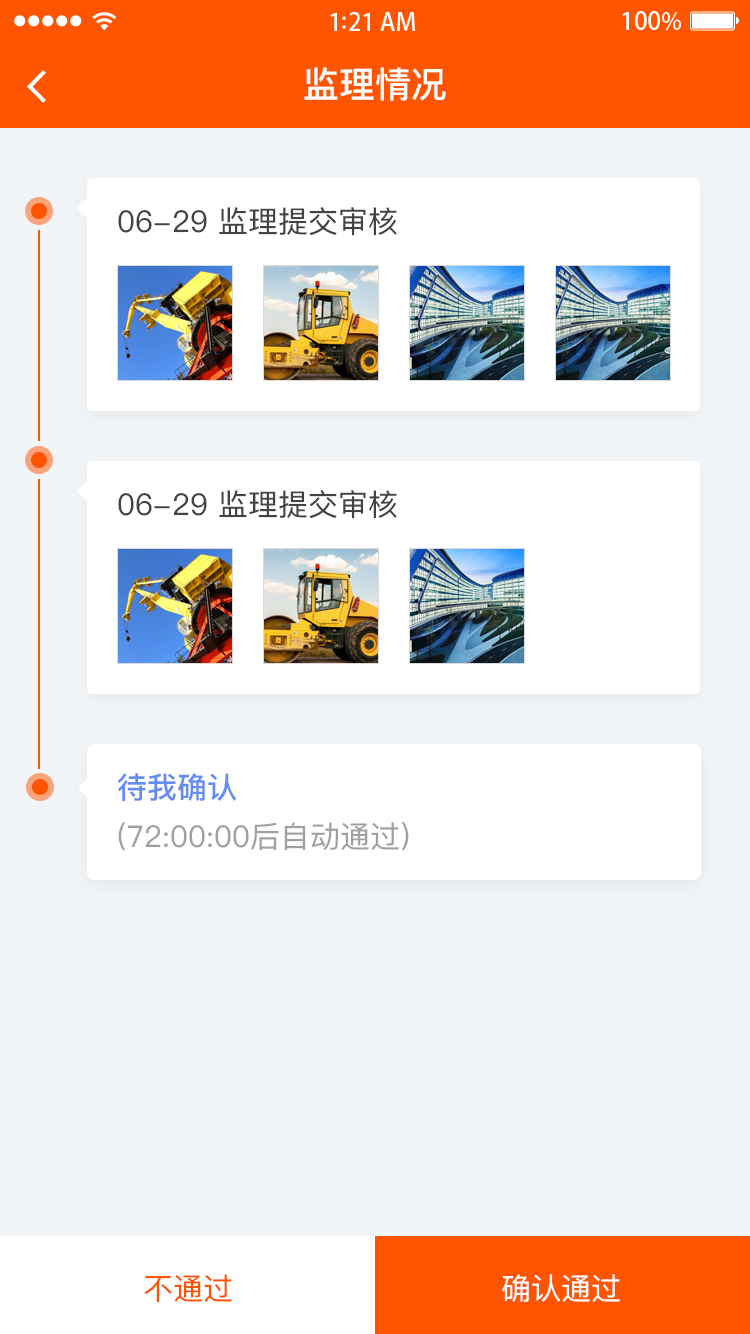
<style>
.page{position:relative;width:750px;height:1334px;background:#f2f5f7}
.page>*{position:absolute;margin:0}
.t1{font:36px "PingFangSC-Medium";color:#ffffff}
.t2{font:30px "PingFangSC-Regular";color:#434343}
.t3{font:30px "PingFangSC-Medium";color:#648df4}
.t4{font:30px "PingFangSC-Regular";color:#a0a0a0}
.t5{font:30px "PingFangSC-Regular";color:#ff5400}
.t6{font:30px "PingFangSC-Regular";color:#ffffff}
</style>
<div class="page">
<p class="t1" style="left:304px;top:67px;width:142px;height:34px">监理情况</p>
<p class="t2" style="left:118px;top:207px;width:279px;height:29px">06-29 监理提交审核</p>
<p class="t2" style="left:118px;top:490px;width:279px;height:29px">06-29 监理提交审核</p>
<p class="t3" style="left:118px;top:773px;width:119px;height:28px">待我确认</p>
<p class="t4" style="left:118px;top:822px;width:291px;height:29px">(72:00:00后自动通过)</p>
<p class="t5" style="left:144px;top:1274px;width:88px;height:29px">不通过</p>
<p class="t6" style="left:502px;top:1274px;width:118px;height:28px">确认通过</p>
</div>
